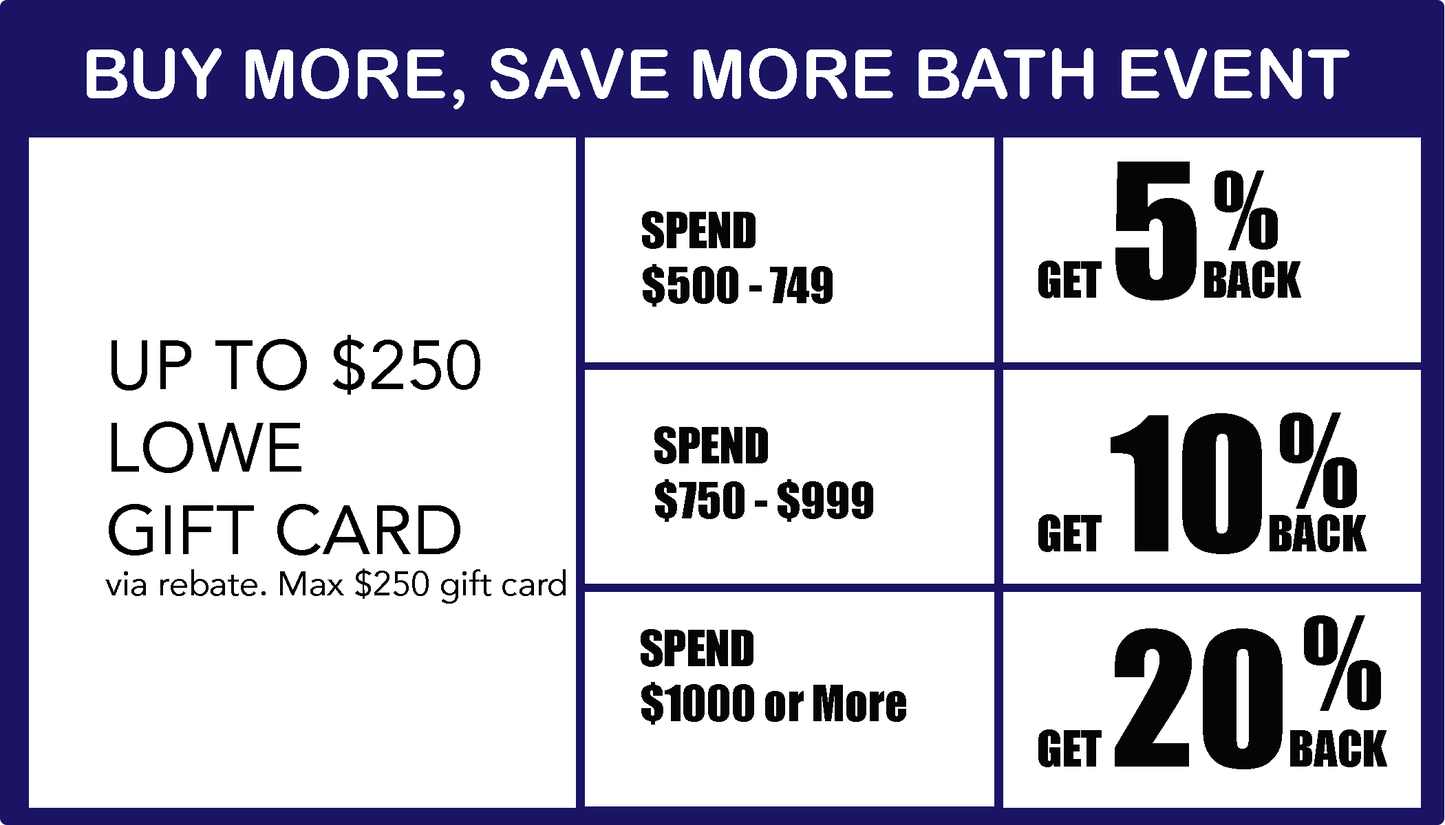
<style>
.page{position:relative;width:1445px;height:825px;background:#ffffff}
.page>*{position:absolute;margin:0}
.t1{font:68.8px "ArialRoundedMTBold";color:#ffffff}
.t2{font:45.9px "Impact";color:#050505}
.t3{font:172px "Impact";color:#050505}
.t4{font:97.7px "Impact";color:#050505}
.t5{font:34.4px "Avenir-Roman";color:#000000}
.t6{font:68.8px "Avenir-Roman";color:#000000}
.t7{font:117.4px "Impact";color:#050505}
.t8{font:116.9px "Impact";color:#050505}
</style>
<div class="page">
<p class="t1" style="left:87px;top:48px;width:1262px;height:61px">BUY MORE, SAVE MORE BATH EVENT</p>
<p class="t2" style="left:1038px;top:162px;width:263px;height:139px">GET <span class="t3">5</span>BACK</p>
<p class="t4" style="left:1214px;top:171px;width:63px;height:79px">%</p>
<p class="t2" style="left:642px;top:211px;width:190px;height:96px">SPEND<br>$500 - 749</p>
<p class="t5" style="left:105px;top:335px;width:460px;height:269px"><span class="t6">UP TO $250<br>LOWE<br>GIFT CARD<br></span>via rebate. Max $250 gift card</p>
<p class="t2" style="left:1038px;top:413px;width:328px;height:141px">GET <span class="t3">10</span>BACK</p>
<p class="t7" style="left:1279px;top:413px;width:78px;height:96px">%</p>
<p class="t2" style="left:654px;top:426px;width:219px;height:96px">SPEND<br>$750 - $999</p>
<p class="t8" style="left:1304px;top:616px;width:77px;height:95px">%</p>
<p class="t2" style="left:640px;top:629px;width:266px;height:96px">SPEND<br>$1000 or More</p>
<p class="t2" style="left:1038px;top:629px;width:349px;height:141px">GET <span class="t3">20</span>BACK</p>
</div>
